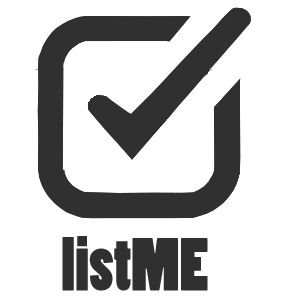
<style>
.page{position:relative;width:285px;height:307px;background:#ffffff}
.page>*{position:absolute;margin:0}
.t1{font:70px "PoplarStd";color:#303030}
</style>
<div class="page">
<p class="t1" style="left:62px;top:236px;width:146px;height:55px">listME</p>
</div>
